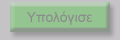
<style>
.page{position:relative;width:120px;height:40px;background:#94c591}
.page>*{position:absolute;margin:0}
.t1{font:14px "ArialMT";color:#8b898b}
</style>
<div class="page">
<p class="t1" style="left:27px;top:11px;width:65px;height:14px">Υπολόγισε</p>
</div>
